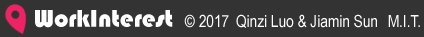
<style>
.page{position:relative;width:424px;height:37px;background:#333333}
.page>*{position:absolute;margin:0}
.t1{font:25px "Bauhaus93";color:#ffffff}
.t2{font:16.7px "ArialNarrow";color:#ffffff}
</style>
<div class="page">
<p class="t1" style="left:35px;top:10px;width:138px;height:18px">WorkInterest</p>
<p class="t2" style="left:184px;top:14px;width:45px;height:14px">© 2017</p>
<p class="t2" style="left:236px;top:14px;width:141px;height:14px">Qinzi Luo &amp; Jiamin Sun</p>
<p class="t2" style="left:388px;top:15px;width:32px;height:12px">M.I.T.</p>
</div>
